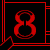
<style>
.page{position:relative;width:50px;height:50px;background:#000000}
.page>*{position:absolute;margin:0}
.t1{font:33.3px "ABitEmpty";color:#cc0000}
</style>
<div class="page">
<p class="t1" style="left:14px;top:10px;width:22px;height:29px">8</p>
</div>
